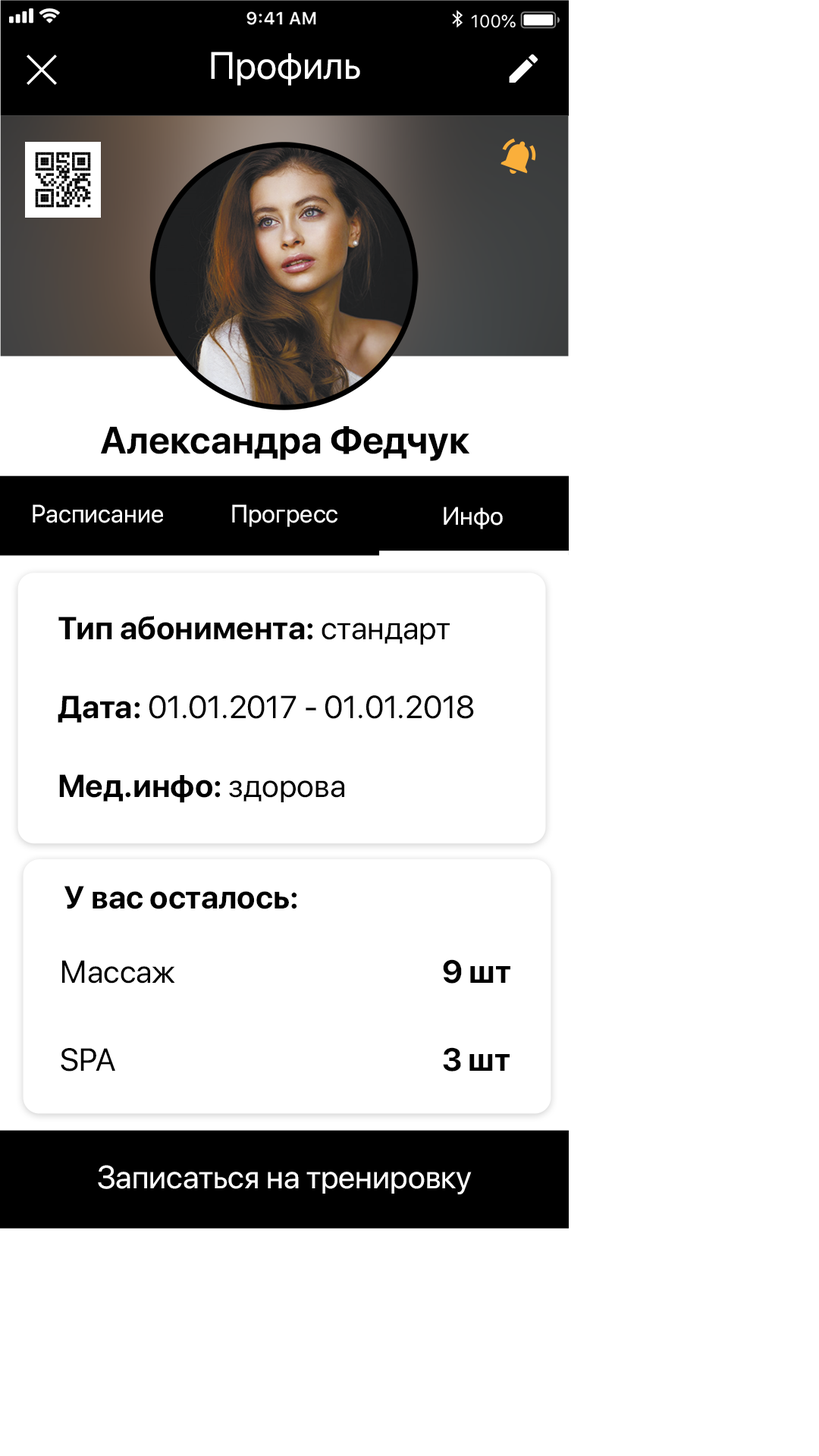
<style>
.page{position:relative;width:819px;height:1456px;background:#ffffff}
.page>*{position:absolute;margin:0}
.t1{font:37.9px "SFProDisplay-Regular";color:#ffffff}
.t2{font:37.9px "SFProDisplay-Bold";color:#000000}
.t3{font:25px "SFProDisplay-Regular";color:#ffffff}
.t4{font:31.8px/79px "SFProDisplay-Regular";color:#000000}
.t5{font:31.8px/79px "SFProDisplay-Bold";color:#000000}
.t6{font:31.8px "SFProDisplay-Bold";color:#000000}
.t7{font:31.8px "SFProDisplay-Regular";color:#000000}
.t8{font:31.8px "SFProDisplay-Regular";color:#ffffff}
</style>
<div class="page">
<p class="t1" style="left:211px;top:52px;width:149px;height:34px">Профиль</p>
<p class="t2" style="left:101px;top:426px;width:369px;height:35px">Александра Федчук</p>
<p class="t3" style="left:33px;top:504px;width:130px;height:19px">Расписание</p>
<p class="t3" style="left:232px;top:504px;width:105px;height:23px">Прогресс</p>
<p class="t3" style="left:444px;top:507px;width:59px;height:22px">Инфо</p>
<p class="t4" style="left:58px;top:616px;width:416px;height:187px"><span class="t5">Тип абонимента:</span> стандарт <br><span class="t5">Дата:</span> 01.01.2017 - 01.01.2018<br><span class="t5">Мед.инфо:</span> здорова</p>
<p class="t6" style="left:64px;top:886px;width:233px;height:23px">У вас осталось:</p>
<p class="t7" style="left:62px;top:960px;width:113px;height:24px">Массаж</p>
<p class="t6" style="left:443px;top:959px;width:67px;height:25px">9 шт</p>
<p class="t7" style="left:61px;top:1048px;width:54px;height:24px">SPA</p>
<p class="t6" style="left:443px;top:1047px;width:67px;height:25px">3 шт</p>
<p class="t8" style="left:98px;top:1165px;width:374px;height:29px">Записаться на тренировку</p>
</div>
